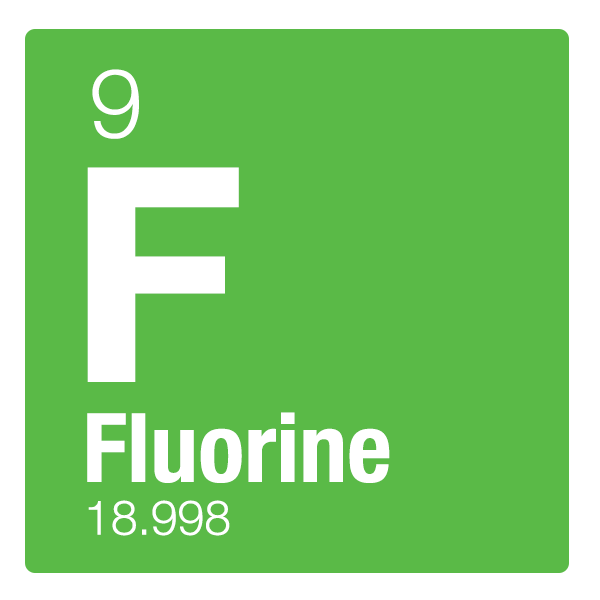
<style>
.page{position:relative;width:600px;height:600px;background:#5aba47}
.page>*{position:absolute;margin:0}
.t1{font:96px "HelveticaNeue-Light";color:#ffffff}
.t2{font:300px "HelveticaNeue-Bold";color:#ffffff}
.t3{font:96px "HelveticaNeue-CondensedBold";color:#ffffff}
.t4{font:48px "HelveticaNeue-Light";color:#ffffff}
</style>
<div class="page">
<p class="t1" style="left:92px;top:69px;width:47px;height:70px">9</p>
<p class="t2" style="left:87px;top:167px;width:152px;height:215px">F</p>
<p class="t3" style="left:87px;top:412px;width:303px;height:71px">Fluorine</p>
<p class="t4" style="left:88px;top:500px;width:142px;height:36px">18.998</p>
</div>
